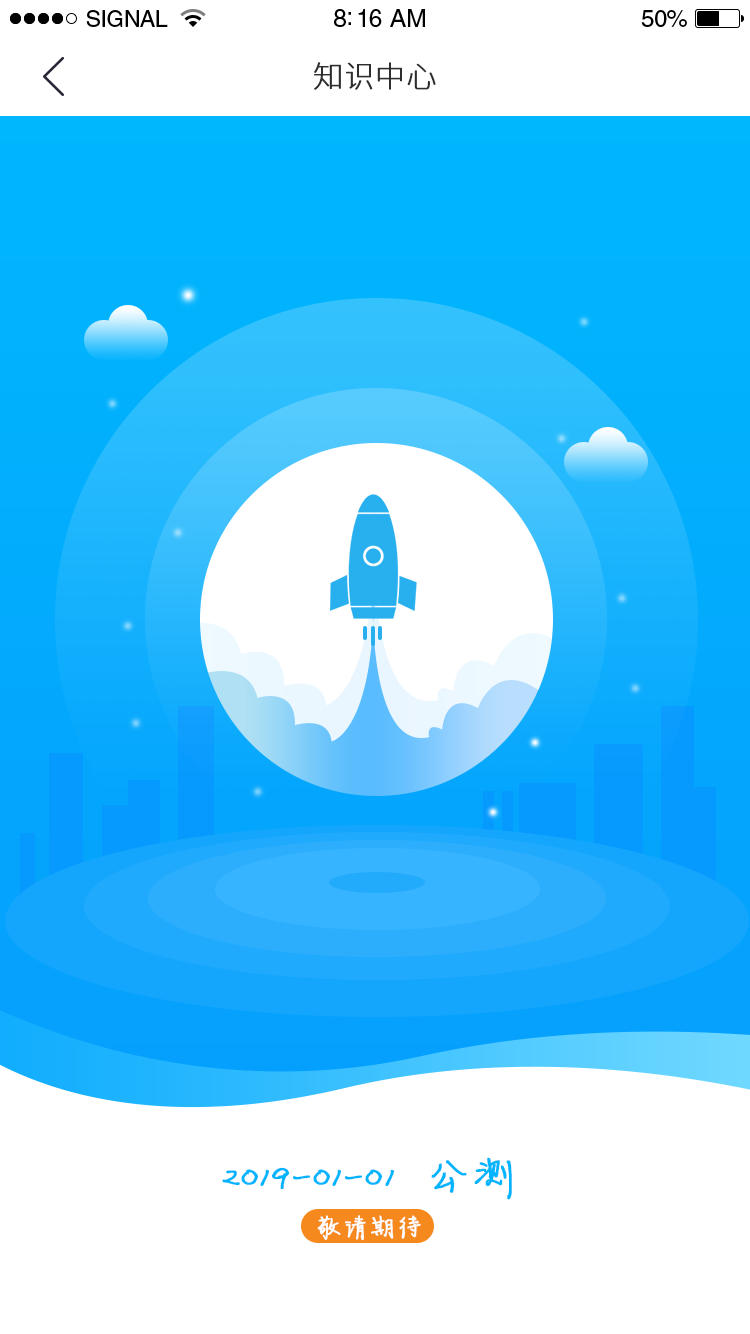
<style>
.page{position:relative;width:750px;height:1334px;background:#ffffff}
.page>*{position:absolute;margin:0}
.t1{font:23px "HelveticaLTStd-Roman";letter-spacing:-0.02em;color:#000000}
.t2{font:25px "HelveticaLTStd-Roman";letter-spacing:-0.02em;color:#000000}
.t3{font:24px "HelveticaLTStd-Roman";letter-spacing:-0.02em;color:#000000}
.t4{font:30px "SourceHanSansCN-ExtraLight";color:#2e2e2e;font-weight:bold}
.t5{font:46px "FZJLJW--GB1-0";color:#00b4fd;font-weight:bold}
.t6{font:26px "FZJLJW--GB1-0";color:#ffffff;font-weight:bold}
</style>
<div class="page">
<p class="t1" style="left:86px;top:10px;width:82px;height:17px">SIGNAL</p>
<p class="t2" style="left:334px;top:9px;width:91px;height:18px">8:16 AM</p>
<p class="t3" style="left:641px;top:10px;width:46px;height:17px">50%</p>
<p class="t4" style="left:314px;top:62px;width:122px;height:28px">知识中心</p>
<p class="t5" style="left:222px;top:1157px;width:290px;height:43px">2019-01-01  公测</p>
<p class="t6" style="left:317px;top:1215px;width:104px;height:26px">敬请期待</p>
</div>
